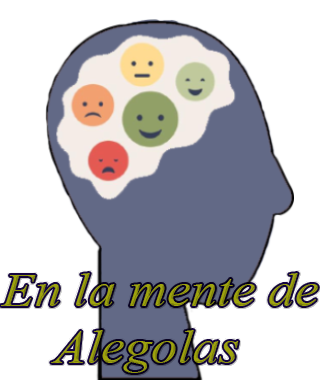
<style>
.page{position:relative;width:320px;height:380px;background:#ffffff}
.page>*{position:absolute;margin:0}
.t1{font:47.5px "TimesNewRomanPS-ItalicMT";color:#a2a70f;scale:1.12 1}
</style>
<div class="page">
<p class="t1" style="left:1px;top:273px;width:317px;height:100px">En la mente de <br>    Alegolas</p>
</div>
